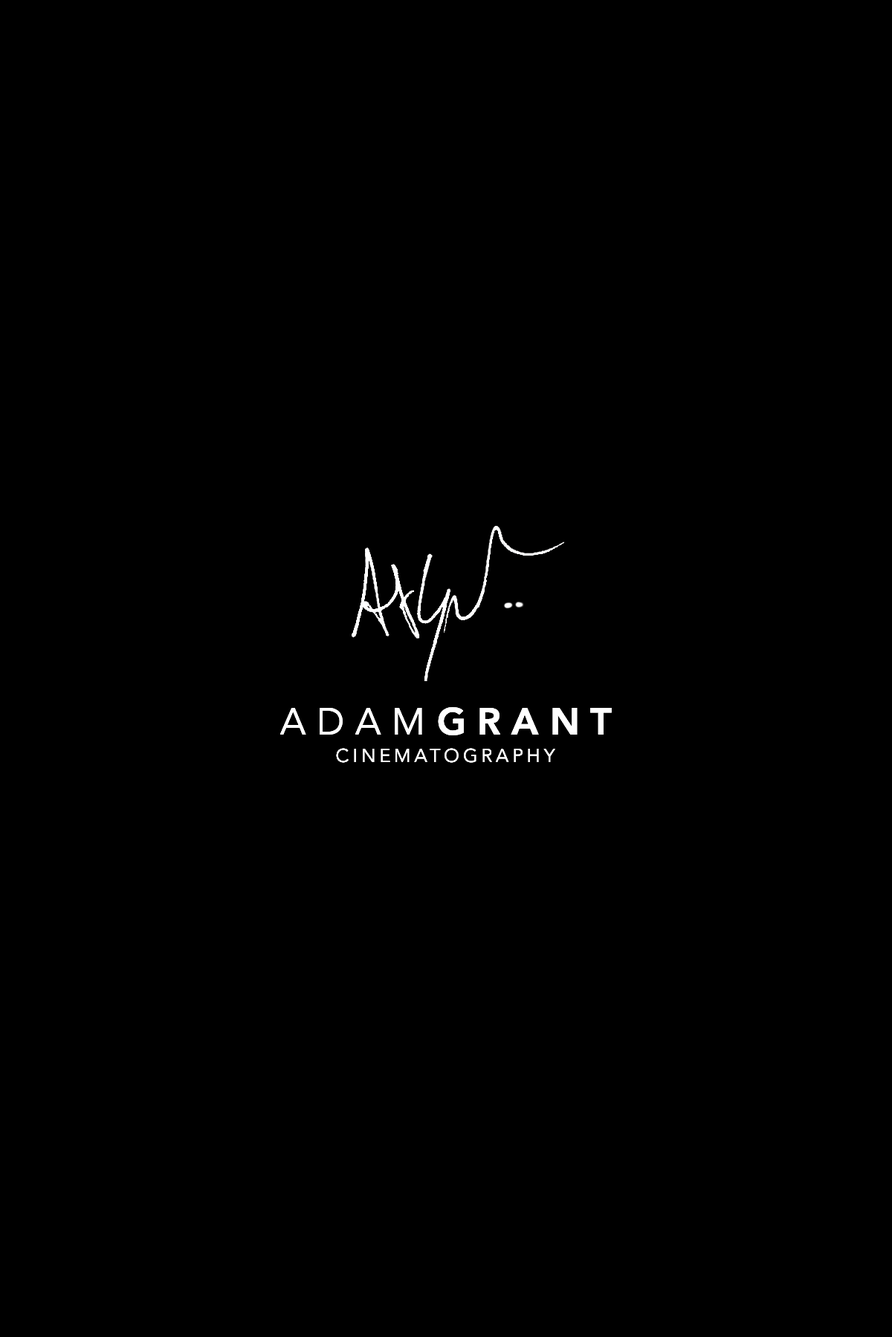
<style>
.page{position:relative;width:892px;height:1337px;background:#000000}
.page>*{position:absolute;margin:0}
.t1{font:37.2px "Avenir-Light";letter-spacing:0.3em;color:#ffffff}
.t2{font:37.2px "Avenir-Heavy";letter-spacing:0.3em;color:#ffffff}
.t3{font:18.6px "Avenir-Light";letter-spacing:0.2em;color:#ffffff}
</style>
<div class="page">
<p class="t1" style="left:280px;top:708px;width:142px;height:27px">ADAM</p>
<p class="t2" style="left:438px;top:707px;width:173px;height:29px">GRANT</p>
<p class="t3" style="left:336px;top:748px;width:219px;height:15px">CINEMATOGRAPHY</p>
</div>
